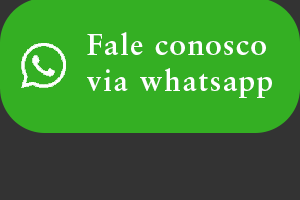
<style>
.page{position:relative;width:300px;height:200px;background:#34af23}
.page>*{position:absolute;margin:0}
.t1{font:30px "SabonLTStd-Bold";letter-spacing:0.05em;color:#ffffff}
</style>
<div class="page">
<p class="t1" style="left:87px;top:32px;width:185px;height:66px">Fale conosco<br>via whatsapp</p>
</div>
